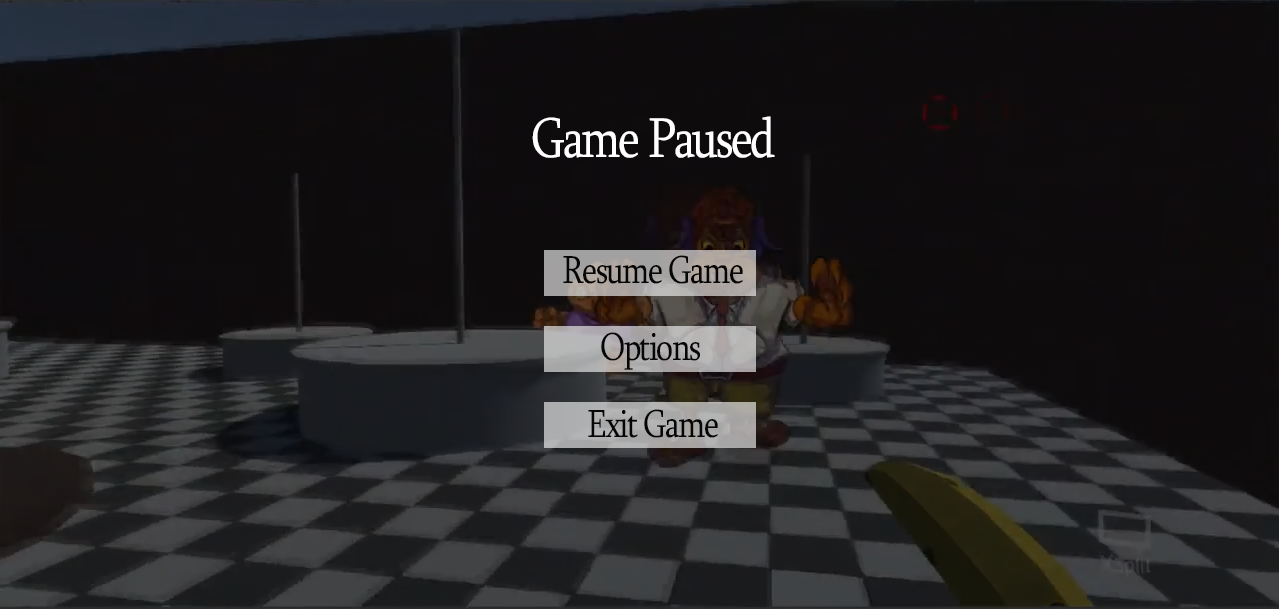
<style>
.page{position:relative;width:1279px;height:609px}
.page>*{position:absolute;margin:0}
.t1{font:57.6px "Sylfaen";letter-spacing:-0.05em;color:#ffffff;scale:0.83 1}
.t2{font:40px "Sylfaen";letter-spacing:-0.05em;color:#060606;scale:0.83 1}
</style>
<div class="page">
<p class="t1" style="left:532px;top:116px;width:243px;height:42px">Game Paused</p>
<p class="t2" style="left:563px;top:255px;width:180px;height:29px">Resume Game</p>
<p class="t2" style="left:601px;top:332px;width:99px;height:38px">Options</p>
<p class="t2" style="left:588px;top:409px;width:130px;height:29px">Exit Game</p>
</div>
